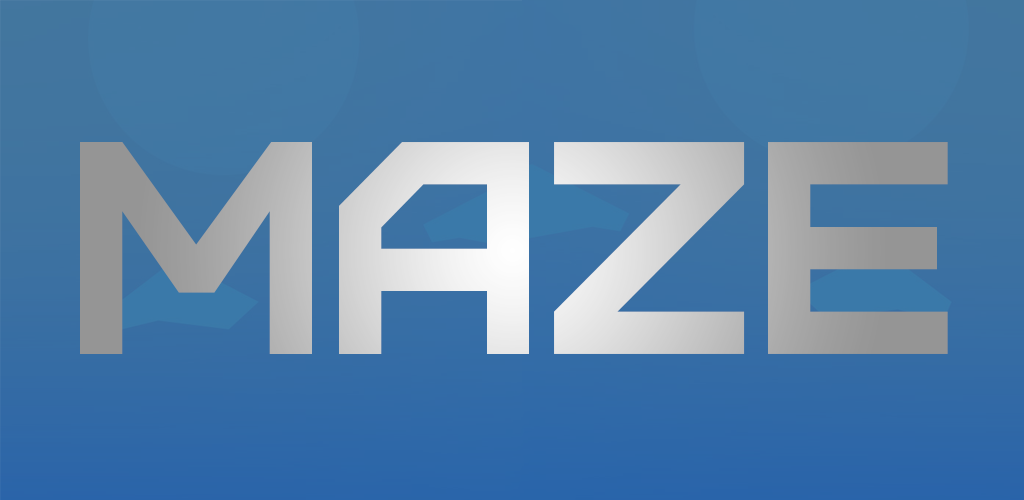
<style>
.page{position:relative;width:1024px;height:500px}
.page>*{position:absolute;margin:0}
.t1{font:302.5px "Furore";text-transform:uppercase}
</style>
<div class="page">
<p class="t1" style="left:80px;top:142px;width:868px;height:212px">MAZE</p>
</div>
